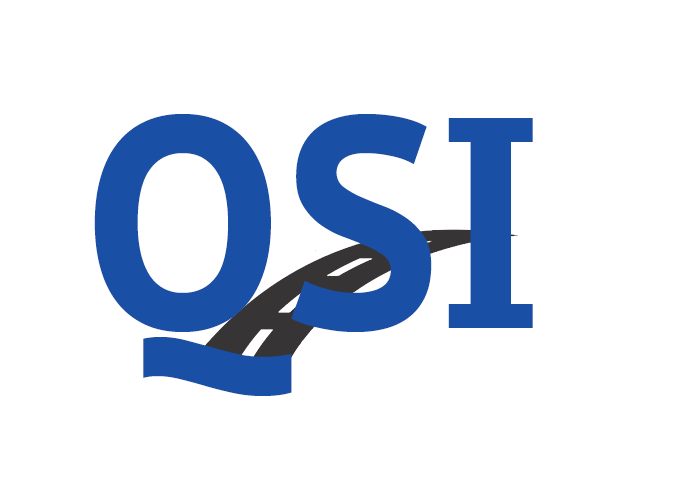
<style>
.page{position:relative;width:700px;height:500px;background:#ffffff}
.page>*{position:absolute;margin:0}
.t1{font:300px "PTSans-CaptionBold";color:#194fa5;text-transform:uppercase;scale:0.91 1}
</style>
<div class="page">
<p class="t1" style="left:94px;top:114px;width:439px;height:282px">QSI</p>
</div>
